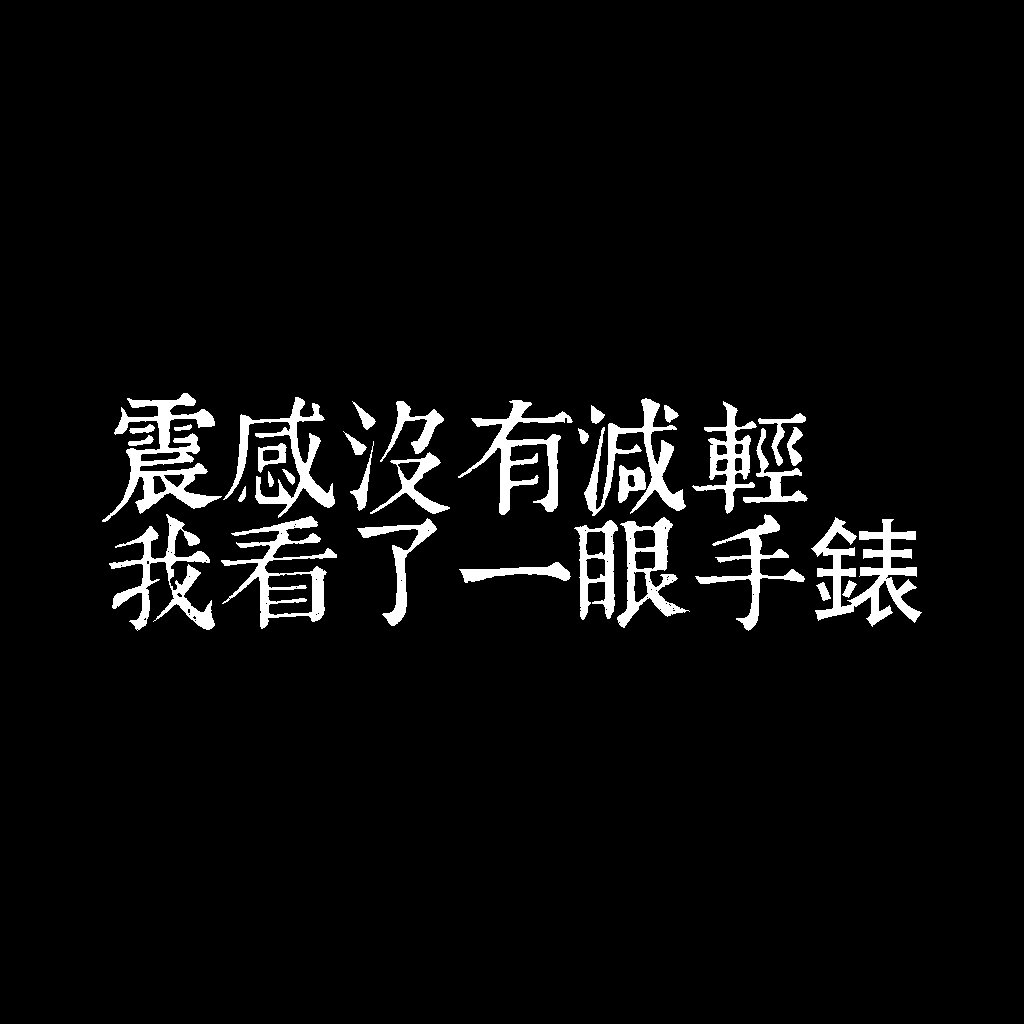
<style>
.page{position:relative;width:1024px;height:1024px;background:#000000}
.page>*{position:absolute;margin:0}
.t1{font:120px/115px "TpldKhangXiDictTrial";letter-spacing:-0.02em;color:#ffffff}
.t2{font:120px/115px "AdobeHeitiStd-Regular";letter-spacing:-0.02em;color:#ffffff}
</style>
<div class="page">
<p class="t1" style="left:102px;top:393px;width:820px;height:238px">震感沒有減輕<br>我看了一眼手<span class="t2">錶</span></p>
</div>
